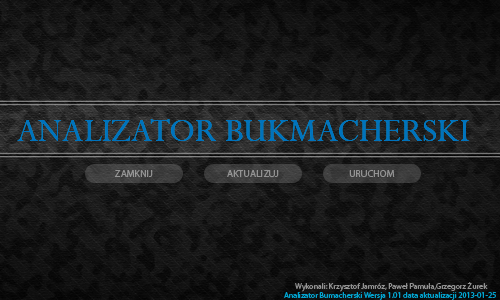
<style>
.page{position:relative;width:500px;height:300px}
.page>*{position:absolute;margin:0}
.t1{font:36px "Perpetua";color:#0072bc}
.t2{font:10px "MyriadPro-Regular";color:#949494}
.t3{font:10px "MyriadPro-Regular";color:#939393}
.t4{font:8px "MyriadPro-Regular";color:#02a4d0}
.t5{font:8px "MyriadPro-Regular";color:#939393}
</style>
<div class="page">
<p class="t1" style="left:17px;top:119px;width:452px;height:22px">ANALIZATOR BUKMACHERSKI</p>
<p class="t1" style="left:17px;top:119px;width:452px;height:22px">ANALIZATOR BUKMACHERSKI</p>
<p class="t2" style="left:115px;top:170px;width:38px;height:7px">ZAMKNIJ</p>
<p class="t3" style="left:227px;top:170px;width:52px;height:7px">AKTUALIZUJ</p>
<p class="t3" style="left:349px;top:170px;width:46px;height:7px">URUCHOM</p>
<p class="t4" style="left:284px;top:292px;width:212px;height:8px">Analizator Bumacherski Wersja 1.01 data aktualizacji 2013-01-25</p>
<p class="t5" style="left:295px;top:282px;width:193px;height:10px">Wykonali: Krzysztof Jamróz, Paweł Pamuła,Grzegorz Żurek</p>
</div>
